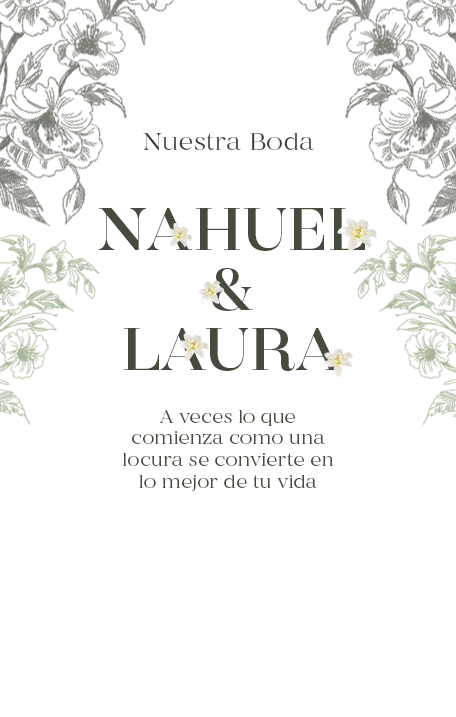
<style>
.page{position:relative;width:456px;height:717px;background:#ffffff}
.page>*{position:absolute;margin:0}
.t1{font:24px "MADECoachella-Thin";color:#3c3c3c}
.t2{font:60px/60px "MADECoachella-Light";color:#464b40}
.t3{font:18px "MADECoachella-Thin";color:#464b40}
</style>
<div class="page">
<p class="t1" style="left:143px;top:133px;width:171px;height:17px">Nuestra Boda</p>
<p class="t2" style="left:98px;top:208px;width:267px;height:163px;text-align:center">NAHUEL<br>&amp;<br>LAURA</p>
<p class="t3" style="left:123px;top:410px;width:210px;height:81px;text-align:center">A veces lo que comienza como una locura se convierte en lo mejor de tu vida</p>
</div>
